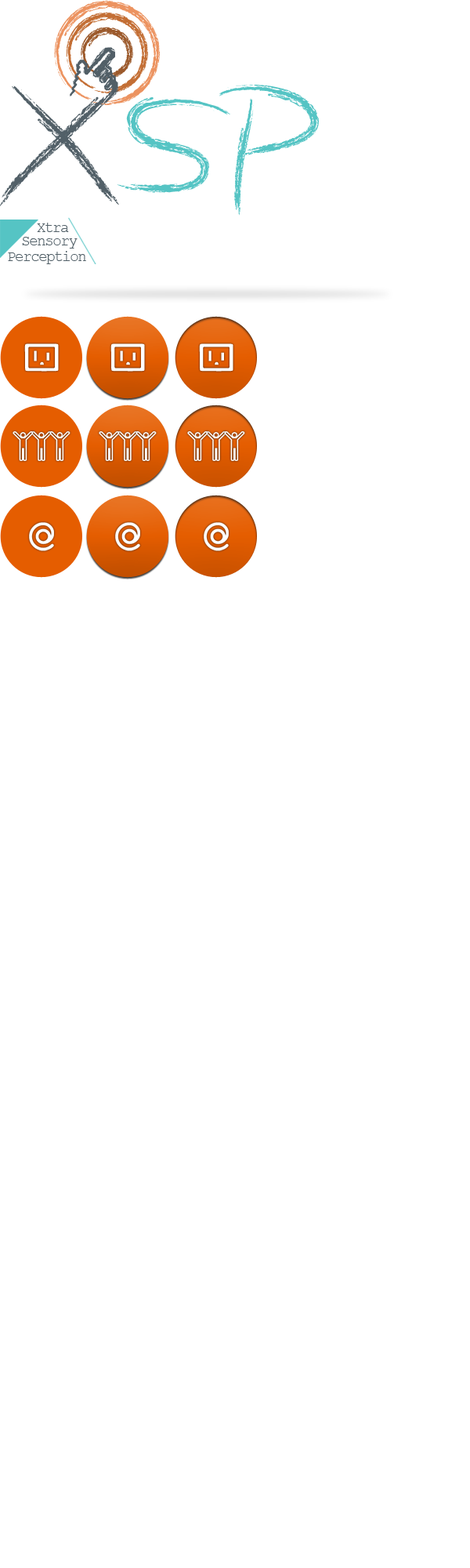
<style>
.page{position:relative;width:470px;height:1568px;background:#ffffff}
.page>*{position:absolute;margin:0}
.t1{font:14.8px "CourierNewPSMT";letter-spacing:-0.07em;color:#526068}
</style>
<div class="page">
<p class="t1" style="left:37px;top:223px;width:32px;height:9px">Xtra</p>
<p class="t1" style="left:22px;top:237px;width:56px;height:12px">Sensory</p>
<p class="t1" style="left:8px;top:251px;width:78px;height:13px">Perception</p>
</div>
